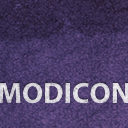
<style>
.page{position:relative;width:128px;height:128px}
.page>*{position:absolute;margin:0}
.t1{font:29.5px "Myriad-Bold";color:#d7d5dc}
</style>
<div class="page">
<p class="t1" style="left:0px;top:82px;width:130px;height:22px">MODICON</p>
</div>
